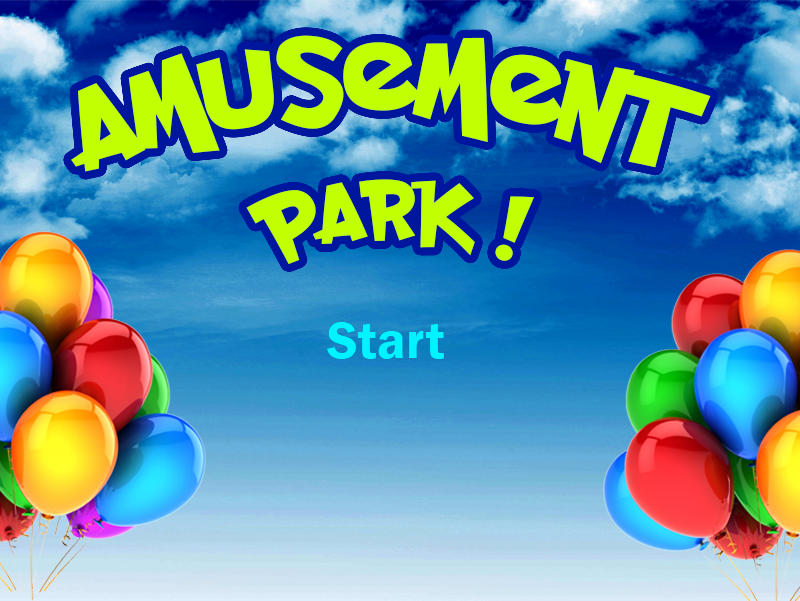
<style>
.page{position:relative;width:800px;height:601px}
.page>*{position:absolute;margin:0}
.t1{font:133.3px "PocketMonk";color:#c1ff03}
.t2{font:96px "PocketMonk";color:#c1ff03}
.t3{font:53.3px "FranklinGothic-Demi";color:#02fcff}
</style>
<div class="page">
<p class="t1" style="left:71px;top:35px;width:640px;height:137px">Amusement</p>
<p class="t2" style="left:246px;top:179px;width:288px;height:85px">park !</p>
<p class="t3" style="left:327px;top:322px;width:117px;height:37px">Start</p>
</div>
